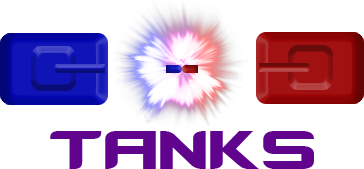
<style>
.page{position:relative;width:364px;height:169px;background:#ffffff}
.page>*{position:absolute;margin:0}
.t1{font:75px "Counter-StrikeRegular";color:#61048d}
</style>
<div class="page">
<p class="t1" style="left:50px;top:131px;width:264px;height:38px">TANKS</p>
</div>
